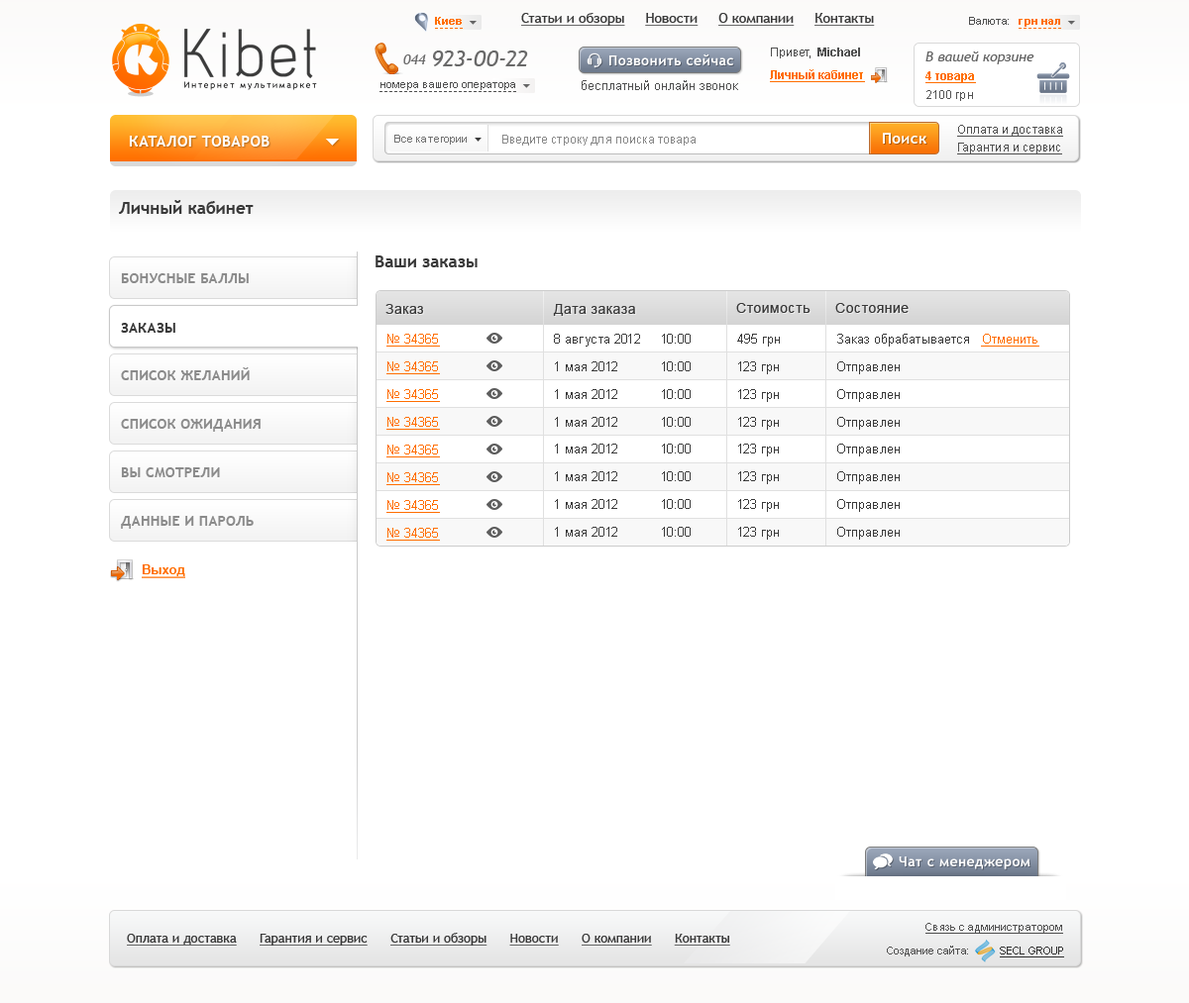
<style>
.page{position:relative;width:1189px;height:1003px;background:#ffffff}
.page>*{position:absolute;margin:0}
.t1{font:10.9px "Arial-BoldMT";color:#ff6e01}
.t2{font:13.9px "TrebuchetMS";color:#393939;text-decoration:underline}
.t3{font:10.9px "ArialMT";color:#4f4f4f}
.t4{font:86.6px "Acid";color:#3b3b3b}
.t5{font:22.8px "TrebuchetMS-Italic";color:#696969}
.t6{font:13.9px "TrebuchetMS-Bold";letter-spacing:0.03em;color:#ffffff}
.t7{font:11.9px "ArialMT";color:#4f4f4f}
.t8{font:11.9px "Arial-BoldMT";color:#4f4f4f}
.t9{font:13.9px "TrebuchetMS-Italic";color:#616161}
.t10{font:13.9px "TrebuchetMS-Italic";color:#696969}
.t11{font:11.9px "Arial-BoldMT";color:#ff6e01;text-decoration:underline}
.t12{font:8.7px "TrebuchetMS";letter-spacing:0.2em;color:#060606}
.t13{font:12.9px "ArialMT";color:#4f4f4f}
.t14{font:11.9px "ArialMT";color:#535353}
.t15{font:11.9px "ArialMT";color:#4f4f4f;text-decoration:underline}
.t16{font:14.9px "TrebuchetMS-Bold";letter-spacing:0.03em;color:#ffffff}
.t17{font:10.9px "ArialMT";color:#727272}
.t18{font:11.9px "ArialMT";color:#888888}
.t19{font:16.8px "TrebuchetMS-Bold";color:#393939}
.t20{font:13.9px "TrebuchetMS-Bold";letter-spacing:0.02em;color:#8b8b8b}
.t21{font:13.9px "ArialMT";letter-spacing:0.03em;color:#393939}
.t22{font:13.9px "TrebuchetMS-Bold";letter-spacing:0.02em;color:#393939}
.t23{font:12.9px "ArialMT";color:#ff6e01;text-decoration:underline}
.t24{font:12.9px "ArialMT";color:#393939}
.t25{font:12.9px "Arial-BoldMT";color:#ff6e01;text-decoration:underline}
.t26{font:10.9px "ArialMT";color:#4f4f4f;text-decoration:underline}
.t27{font:12.9px "TrebuchetMS";color:#393939;text-decoration:underline}
.t28{font:10.9px "ArialMT";color:#303030;text-decoration:underline}
</style>
<div class="page">
<p class="t1" style="left:435px;top:17px;width:27px;height:8px">Киев</p>
<p class="t2" style="left:521px;top:13px;width:354px;height:13px">Статьи и обзоры     Новости     О компании     Контакты</p>
<p class="t3" style="left:969px;top:17px;width:39px;height:8px">Валюта:</p>
<p class="t4" style="left:184px;top:29px;width:132px;height:49px">Kibet</p>
<p class="t1" style="left:1018px;top:19px;width:42px;height:8px">грн нал</p>
<p class="t5" style="left:433px;top:51px;width:95px;height:15px">923-00-22</p>
<p class="t6" style="left:609px;top:53px;width:124px;height:12px">Позвонить сейчас</p>
<p class="t7" style="left:771px;top:48px;width:89px;height:10px">Привет,  <span class="t8">Michael</span></p>
<p class="t9" style="left:925px;top:52px;width:109px;height:12px">В вашей корзине</p>
<p class="t10" style="left:403px;top:54px;width:23px;height:10px">044</p>
<p class="t11" style="left:770px;top:69px;width:95px;height:13px">Личный кабинет</p>
<p class="t11" style="left:925px;top:71px;width:51px;height:12px">4 товара</p>
<p class="t12" style="left:184px;top:81px;width:133px;height:9px">Интернет мультимаркет</p>
<p class="t3" style="left:380px;top:82px;width:135px;height:8px">номера вашего оператора</p>
<p class="t13" style="left:581px;top:80px;width:157px;height:10px">бесплатный онлайн звонок</p>
<p class="t14" style="left:926px;top:90px;width:47px;height:11px">2100 грн</p>
<p class="t15" style="left:957px;top:125px;width:106px;height:12px">Оплата и доставка</p>
<p class="t16" style="left:129px;top:136px;width:140px;height:11px">КАТАЛОГ ТОВАРОВ</p>
<p class="t17" style="left:394px;top:135px;width:72px;height:10px">Все категории</p>
<p class="t18" style="left:502px;top:135px;width:193px;height:11px">Введите строку для поиска товара</p>
<p class="t16" style="left:882px;top:133px;width:44px;height:11px">Поиск</p>
<p class="t15" style="left:957px;top:143px;width:105px;height:12px">Гарантия и сервис</p>
<p class="t19" style="left:119px;top:200px;width:135px;height:14px">Личный кабинет</p>
<p class="t19" style="left:375px;top:256px;width:102px;height:11px">Ваши заказы</p>
<p class="t20" style="left:121px;top:273px;width:128px;height:10px">БОНУСНЫЕ БАЛЛЫ</p>
<p class="t21" style="left:385px;top:304px;width:38px;height:10px">Заказ</p>
<p class="t21" style="left:553px;top:304px;width:82px;height:12px">Дата заказа</p>
<p class="t21" style="left:736px;top:303px;width:74px;height:10px">Стоимость</p>
<p class="t21" style="left:835px;top:303px;width:73px;height:10px">Состояние</p>
<p class="t22" style="left:121px;top:323px;width:54px;height:10px">ЗАКАЗЫ</p>
<p class="t23" style="left:386px;top:334px;width:54px;height:13px">№ 34365</p>
<p class="t24" style="left:554px;top:334px;width:136px;height:13px">8 августа 2012 10:00</p>
<p class="t24" style="left:737px;top:334px;width:42px;height:13px">495 грн</p>
<p class="t24" style="left:837px;top:334px;width:202px;height:13px">Заказ обрабатывается   <span class="t23">Отменить</span></p>
<p class="t23" style="left:386px;top:362px;width:54px;height:12px">№ 34365</p>
<p class="t24" style="left:555px;top:362px;width:135px;height:9px">1 мая 2012  10:00</p>
<p class="t24" style="left:738px;top:362px;width:40px;height:12px">123 грн</p>
<p class="t24" style="left:837px;top:362px;width:62px;height:12px">Отправлен</p>
<p class="t20" style="left:121px;top:367px;width:129px;height:13px">СПИСОК ЖЕЛАНИЙ</p>
<p class="t23" style="left:386px;top:389px;width:54px;height:13px">№ 34365</p>
<p class="t24" style="left:555px;top:389px;width:135px;height:10px">1 мая 2012  10:00</p>
<p class="t24" style="left:738px;top:389px;width:40px;height:13px">123 грн</p>
<p class="t24" style="left:837px;top:389px;width:62px;height:13px">Отправлен</p>
<p class="t20" style="left:121px;top:419px;width:139px;height:13px">СПИСОК ОЖИДАНИЯ</p>
<p class="t23" style="left:386px;top:417px;width:54px;height:13px">№ 34365</p>
<p class="t24" style="left:555px;top:417px;width:135px;height:10px">1 мая 2012  10:00</p>
<p class="t24" style="left:738px;top:417px;width:40px;height:13px">123 грн</p>
<p class="t24" style="left:837px;top:417px;width:62px;height:13px">Отправлен</p>
<p class="t23" style="left:386px;top:445px;width:54px;height:13px">№ 34365</p>
<p class="t24" style="left:555px;top:444px;width:135px;height:10px">1 мая 2012  10:00</p>
<p class="t24" style="left:738px;top:444px;width:40px;height:13px">123 грн</p>
<p class="t24" style="left:837px;top:444px;width:62px;height:13px">Отправлен</p>
<p class="t20" style="left:121px;top:467px;width:99px;height:10px">ВЫ СМОТРЕЛИ</p>
<p class="t23" style="left:386px;top:472px;width:54px;height:13px">№ 34365</p>
<p class="t24" style="left:555px;top:471px;width:135px;height:10px">1 мая 2012  10:00</p>
<p class="t24" style="left:738px;top:471px;width:40px;height:13px">123 грн</p>
<p class="t24" style="left:837px;top:471px;width:62px;height:13px">Отправлен</p>
<p class="t23" style="left:386px;top:500px;width:54px;height:13px">№ 34365</p>
<p class="t24" style="left:555px;top:499px;width:135px;height:10px">1 мая 2012  10:00</p>
<p class="t24" style="left:738px;top:499px;width:40px;height:13px">123 грн</p>
<p class="t24" style="left:837px;top:499px;width:62px;height:13px">Отправлен</p>
<p class="t20" style="left:121px;top:516px;width:133px;height:13px">ДАННЫЕ И ПАРОЛЬ</p>
<p class="t23" style="left:386px;top:528px;width:54px;height:13px">№ 34365</p>
<p class="t24" style="left:555px;top:527px;width:135px;height:10px">1 мая 2012  10:00</p>
<p class="t24" style="left:738px;top:527px;width:40px;height:13px">123 грн</p>
<p class="t24" style="left:837px;top:527px;width:62px;height:13px">Отправлен</p>
<p class="t25" style="left:142px;top:565px;width:43px;height:13px">Выход</p>
<p class="t6" style="left:898px;top:857px;width:132px;height:13px">Чат с менеджером</p>
<p class="t26" style="left:925px;top:923px;width:138px;height:11px">Связь с администратором</p>
<p class="t27" style="left:127px;top:933px;width:603px;height:13px">Оплата и доставка      Гарантия и сервис      Статьи и обзоры      Новости      О компании      Контакты</p>
<p class="t3" style="left:886px;top:946px;width:82px;height:11px">Создание сайта:</p>
<p class="t28" style="left:999px;top:947px;width:65px;height:11px">SECL GROUP</p>
</div>
